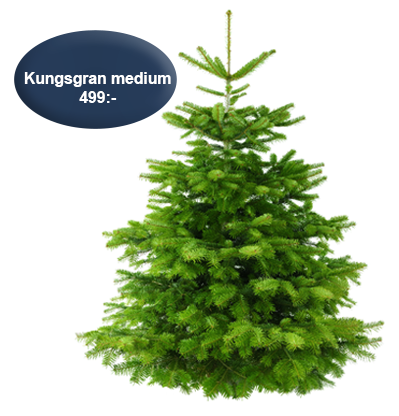
<style>
.page{position:relative;width:399px;height:416px;background:#ffffff}
.page>*{position:absolute;margin:0}
.t1{font:15.7px "Arial-BoldMT";color:#ffffff}
</style>
<div class="page">
<p class="t1" style="left:24px;top:72px;width:147px;height:31px;text-align:center">Kungsgran medium<br>499:-</p>
</div>
